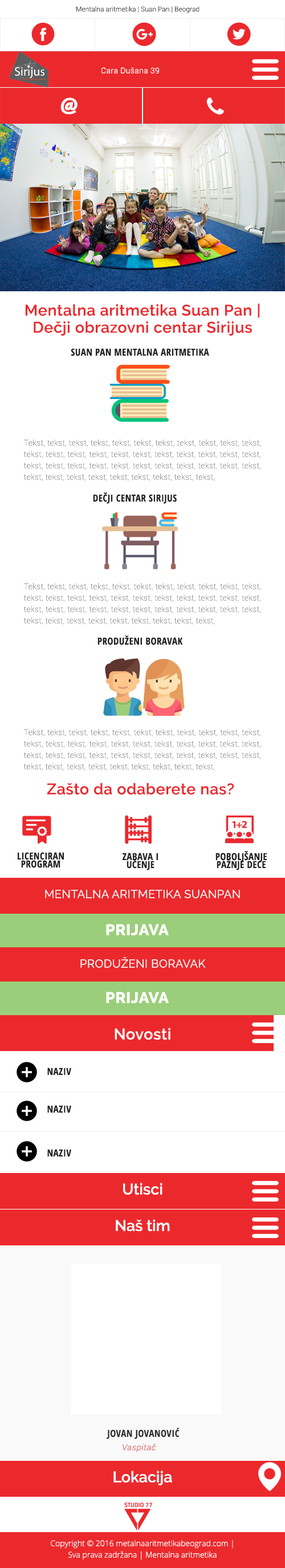
<style>
.page{position:relative;width:285px;height:1568px;background:#ffffff}
.page>*{position:absolute;margin:0}
.t1{font:6.8px "Roboto-Light";color:#333333}
.t2{font:8px "Roboto-Light";letter-spacing:0.025em;color:#ffffff}
.t3{font:15.4px/17.1px "Raleway-SemiBold";letter-spacing:0.025em;color:#eb292d}
.t4{font:9.7px "OpenSans-CondensedBold";letter-spacing:0.025em;color:#222222;text-transform:uppercase}
.t5{font:8px/11.4px "Roboto-Thin";letter-spacing:0.025em;color:#666665}
.t6{font:15.4px "Raleway-SemiBold";letter-spacing:0.025em;color:#eb292d}
.t7{font:9.7px/8px "OpenSans-CondensedBold";letter-spacing:0.025em;color:#222222;text-transform:uppercase}
.t8{font:11.4px "Raleway-Regular";letter-spacing:0.025em;color:#ffffff;text-transform:uppercase}
.t9{font:15.4px "Raleway-ExtraBold";letter-spacing:0.025em;color:#ffffff;text-transform:uppercase}
.t10{font:15.4px "Raleway-SemiBold";letter-spacing:0.025em;color:#ffffff}
.t11{font:15.4px "Raleway-SemiBold";color:#ffffff}
.t12{font:9.7px "OpenSans-CondensedBold";letter-spacing:0.025em;color:#333333;text-transform:uppercase}
.t13{font:8.5px "Roboto-Light";letter-spacing:0.025em;color:#de6262;font-style:italic}
.t14{font:8px/11.4px "OpenSans-Light";color:#ffffff}
</style>
<div class="page">
<p class="t1" style="left:76px;top:6px;width:123px;height:7px">Mentalna aritmetika | Suan Pan | Beograd</p>
<p class="t2" style="left:101px;top:67px;width:58px;height:7px">Cara Dušana 39</p>
<p class="t3" style="left:25px;top:303px;width:235px;height:33px;text-align:center">Mentalna aritmetika Suan Pan | <br>Dečji obrazovni centar Sirijus</p>
<p class="t4" style="left:71px;top:348px;width:138px;height:8px">Suan Pan mentalna aritmetika</p>
<p class="t5" style="left:24px;top:439px;width:236px;height:42px;text-align:justify">Tekst, tekst, tekst, tekst, tekst, tekst, tekst, tekst, tekst, tekst, tekst, tekst, tekst, tekst, tekst, tekst, tekst, tekst, tekst, tekst, tekst, tekst,  tekst, tekst, tekst, tekst, tekst, tekst, tekst, tekst, tekst, tekst, tekst, tekst, tekst, tekst, tekst, tekst, tekst, tekst, tekst, tekst,</p>
<p class="t4" style="left:93px;top:492px;width:84px;height:12px">Dečji centar Sirijus</p>
<p class="t5" style="left:24px;top:583px;width:236px;height:42px;text-align:justify">Tekst, tekst, tekst, tekst, tekst, tekst, tekst, tekst, tekst, tekst, tekst, tekst, tekst, tekst, tekst, tekst, tekst, tekst, tekst, tekst, tekst, tekst,  tekst, tekst, tekst, tekst, tekst, tekst, tekst, tekst, tekst, tekst, tekst, tekst, tekst, tekst, tekst, tekst, tekst, tekst, tekst, tekst,</p>
<p class="t4" style="left:97px;top:636px;width:86px;height:9px">Produženi boravak</p>
<p class="t5" style="left:24px;top:729px;width:236px;height:42px;text-align:justify">Tekst, tekst, tekst, tekst, tekst, tekst, tekst, tekst, tekst, tekst, tekst, tekst, tekst, tekst, tekst, tekst, tekst, tekst, tekst, tekst, tekst, tekst,  tekst, tekst, tekst, tekst, tekst, tekst, tekst, tekst, tekst, tekst, tekst, tekst, tekst, tekst, tekst, tekst, tekst, tekst, tekst, tekst,</p>
<p class="t6" style="left:47px;top:783px;width:187px;height:12px">Zašto da odaberete nas?</p>
<p class="t7" style="left:18px;top:852px;width:46px;height:16px;text-align:justify">Licenciran <br>program</p>
<p class="t7" style="left:123px;top:853px;width:35px;height:17px;text-align:justify">Zabava i <br>učenje</p>
<p class="t7" style="left:215px;top:851px;width:52px;height:19px;text-align:center">Poboljšanje <br>pažnje dece</p>
<p class="t8" style="left:45px;top:890px;width:195px;height:8px">Mentalna aritmetika Suanpan</p>
<p class="t9" style="left:106px;top:924px;width:63px;height:12px">Prijava</p>
<p class="t8" style="left:80px;top:957px;width:126px;height:11px">Produženi boravak</p>
<p class="t9" style="left:106px;top:992px;width:63px;height:12px">Prijava</p>
<p class="t10" style="left:115px;top:1028px;width:55px;height:12px">Novosti</p>
<p class="t4" style="left:47px;top:1068px;width:24px;height:7px">Naziv</p>
<p class="t4" style="left:47px;top:1105px;width:24px;height:8px">Naziv</p>
<p class="t4" style="left:47px;top:1149px;width:24px;height:7px">Naziv</p>
<p class="t11" style="left:123px;top:1183px;width:39px;height:12px">Utisci</p>
<p class="t11" style="left:116px;top:1219px;width:54px;height:12px">Naš tim</p>
<p class="t12" style="left:107px;top:1428px;width:73px;height:11px">Jovan Jovanović</p>
<p class="t13" style="left:123px;top:1444px;width:33px;height:8px">Vaspitač</p>
<p class="t11" style="left:113px;top:1471px;width:59px;height:14px">Lokacija</p>
<p class="t14" style="left:51px;top:1540px;width:182px;height:20px;text-align:center">Copyright © 2016 metalnaaritmetikabeograd.com | <br>Sva prava zadržana | Mentalna aritmetika</p>
</div>
